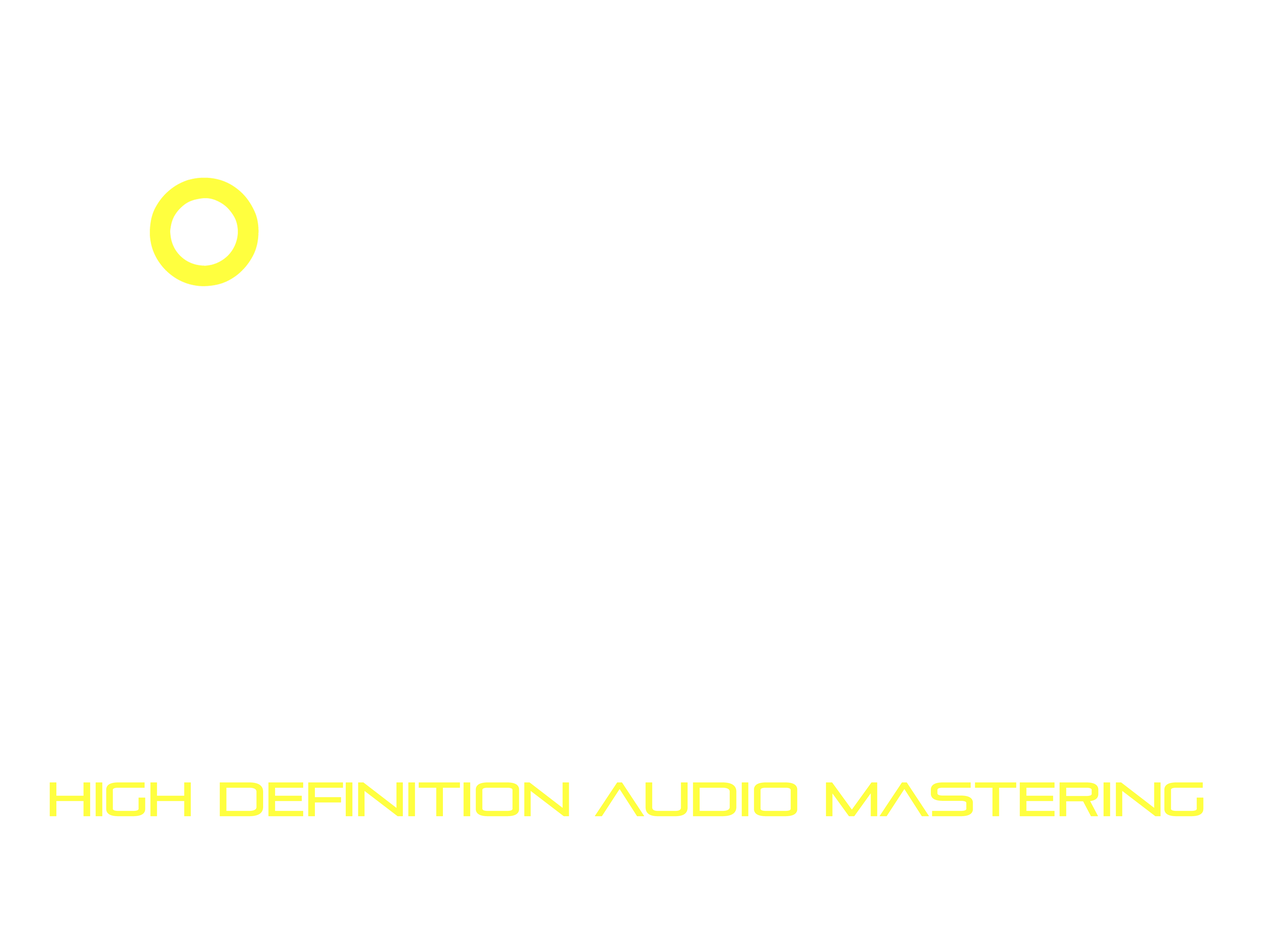
<style>
.page{position:relative;width:1261px;height:946px;background:#ffffff}
.page>*{position:absolute;margin:0}
.t1{font:47.5px "Pirulen";letter-spacing:-0.033em;color:#ffff40;text-transform:uppercase;font-weight:bold}
</style>
<div class="page">
<p class="t1" style="left:50px;top:782px;width:1154px;height:34px">High Definition Audio Mastering</p>
</div>
